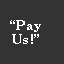
<style>
.page{position:relative;width:64px;height:64px;background:#333333}
.page>*{position:absolute;margin:0}
.t1{font:13px/14px "CenturySchoolbook-Bold";color:#ffffff}
</style>
<div class="page">
<p class="t1" style="left:10px;top:20px;width:31px;height:24px;text-align:center">“Pay<br>Us!”</p>
</div>
